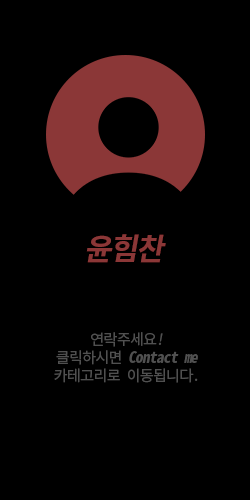
<style>
.page{position:relative;width:250px;height:500px;background:#000000}
.page>*{position:absolute;margin:0}
.t1{font:30px "NotoSansMonoCJKkr-Bold";letter-spacing:-0.04em;color:#8b3737;font-style:italic}
.t2{font:15px "NotoSansMonoCJKkr-Regular";letter-spacing:-0.04em;color:#505050}
.t3{font:15px "NotoSansMonoCJKkr-Regular";letter-spacing:-0.04em;color:#505050;font-style:italic}
.t4{font:15px "NotoSansMonoCJKkr-Bold";letter-spacing:-0.04em;color:#505050;font-style:italic}
</style>
<div class="page">
<p class="t1" style="left:86px;top:234px;width:80px;height:29px">윤힘찬</p>
<p class="t2" style="left:54px;top:332px;width:144px;height:51px;text-align:center">연락주세요<span class="t3">!<br></span>클릭하시면 <span class="t4">Contact me<br></span>카테고리로 이동됩니다.</p>
</div>
